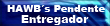
<style>
.page{position:relative;width:110px;height:26px}
.page>*{position:absolute;margin:0}
.t1{font:10px "Arial-Black";color:#ffffff}
.t2{font:11px "Arial-Black";color:#ffffff}
</style>
<div class="page">
<p class="t1" style="left:7px;top:5px;width:98px;height:7px">HAWB´s Pendente</p>
<p class="t2" style="left:21px;top:15px;width:68px;height:10px">Entregador</p>
</div>
